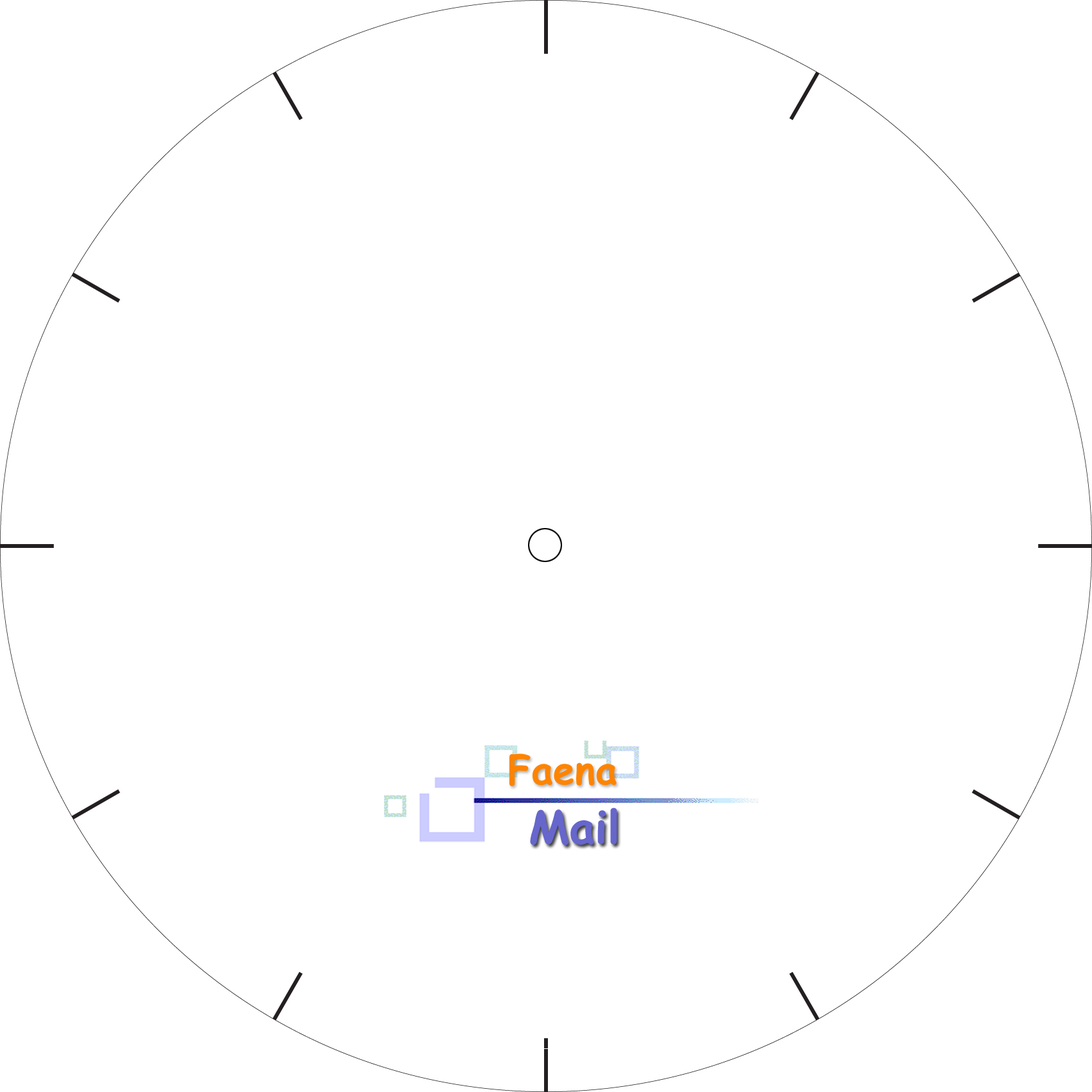
<style>
.page{position:relative;width:1092px;height:1092px;background:#ffffff}
.page>*{position:absolute;margin:0}
.t1{font:39.3px "ComicSansMS-Bold";color:#fe8400}
.t2{font:45.3px "ComicSansMS-Bold";color:#6666cc}
</style>
<div class="page">
<p class="t1" style="left:509px;top:753px;width:108px;height:33px">Faena</p>
<p class="t2" style="left:530px;top:807px;width:87px;height:38px">Mail</p>
</div>
